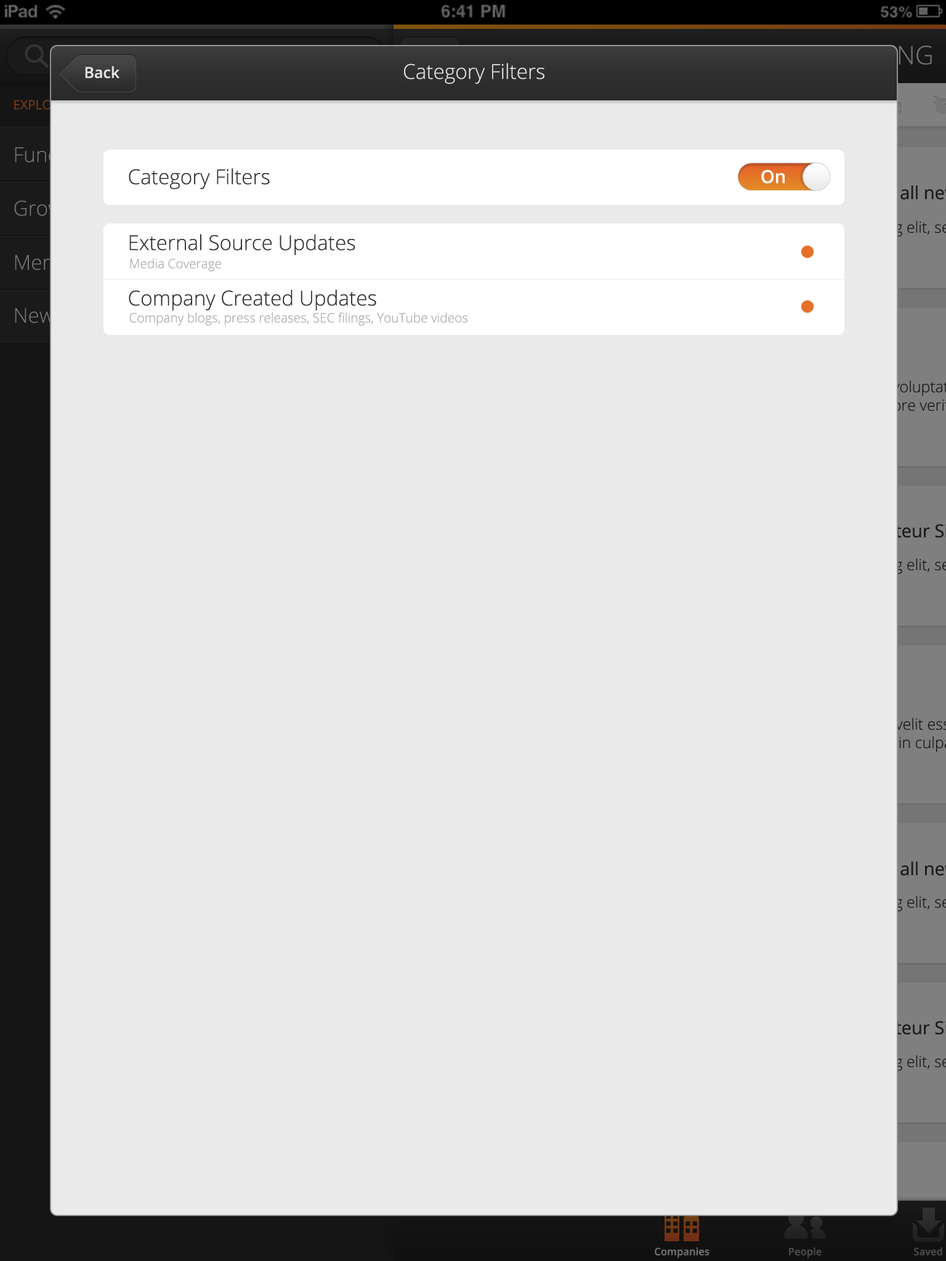
<style>
.page{position:relative;width:946px;height:1261px;background:#eaeaea}
.page>*{position:absolute;margin:0}
.t1{font:15.4px "OpenSans-Semibold";color:#e5e5e5}
.t2{font:20.5px "OpenSans-Light";color:#e5e5e5}
.t3{font:20.5px "OpenSans-Light";color:#343434}
.t4{font:18px "OpenSans-Semibold";color:#ffffff}
.t5{font:12.8px "OpenSans-Light";color:#aaaaaa}
</style>
<div class="page">
<p class="t1" style="left:85px;top:66px;width:35px;height:12px">Back</p>
<p class="t2" style="left:404px;top:63px;width:140px;height:21px">Category Filters</p>
<p class="t3" style="left:129px;top:168px;width:141px;height:22px">Category Filters</p>
<p class="t4" style="left:761px;top:170px;width:23px;height:13px">On</p>
<p class="t3" style="left:129px;top:234px;width:226px;height:22px">External Source Updates</p>
<p class="t5" style="left:130px;top:258px;width:91px;height:14px">Media Coverage</p>
<p class="t3" style="left:129px;top:289px;width:247px;height:22px">Company Created Updates</p>
<p class="t5" style="left:129px;top:312px;width:339px;height:14px">Company blogs, press releases, SEC filings, YouTube videos</p>
</div>
